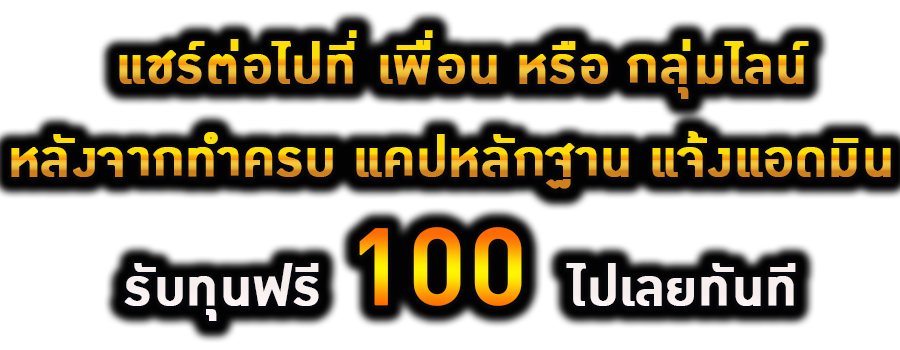
<style>
.page{position:relative;width:900px;height:350px;background:#ffffff}
.page>*{position:absolute;margin:0}
.t1{font:70.2px "DBOzoneX-Medium";font-weight:bold}
.t2{font:150.3px "DBOzoneX-Medium";font-weight:bold}
.t3{font:70.2px "DBOzoneX-Medium";color:#f8f0ef;font-weight:bold}
.t4{font:70.2px "DBOzoneX-Medium";color:#f7efee;font-weight:bold}
</style>
<div class="page">
<p class="t1" style="left:119px;top:30px;width:690px;height:69px">แชร์ต่อไปที่ เพื่อน หรือ กลุ่มไลน์</p>
<p class="t1" style="left:11px;top:131px;width:880px;height:58px">หลังจากทำครบ แคปหลักฐาน แจ้งแอดมิน</p>
<p class="t2" style="left:359px;top:227px;width:163px;height:79px">100</p>
<p class="t3" style="left:124px;top:263px;width:195px;height:58px">รับทุนฟรี</p>
<p class="t4" style="left:566px;top:263px;width:230px;height:43px">ไปเลยทันที</p>
</div>
